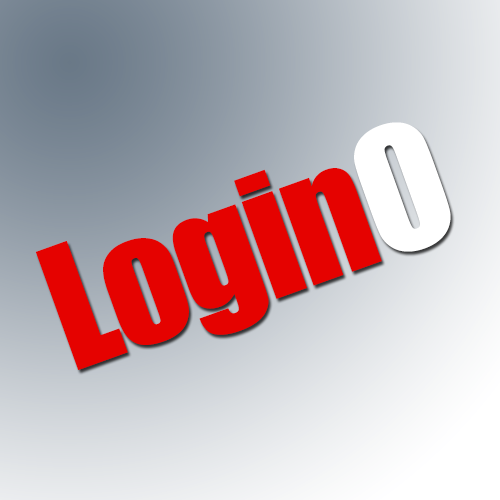
<style>
.page{position:relative;width:500px;height:500px}
.page>*{position:absolute;margin:0}
.t1{font:158.5px "Impact";letter-spacing:-0.025em;color:#e50200}
.t2{font:158.5px "Impact";letter-spacing:-0.025em;color:#ffffff}
</style>
<div class="page">
<p class="t1" style="left:35px;top:122px;width:416px;height:248px;rotate:-20deg">Login<span class="t2">O</span></p>
</div>
